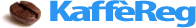
<style>
.page{position:relative;width:196px;height:28px;background:#ffffff}
.page>*{position:absolute;margin:0}
.t1{font:30px "MyriadPro-BoldCond";letter-spacing:-0.08em;color:#2b96f1;scale:1.87 1}
</style>
<div class="page">
<p class="t1" style="left:50px;top:0px;width:146px;height:28px">KaffèReg</p>
</div>
